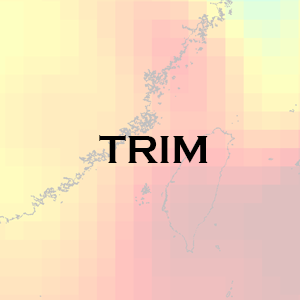
<style>
.page{position:relative;width:300px;height:300px}
.page>*{position:absolute;margin:0}
.t1{font:40px "CopperplateGothic-Bold";color:#000000}
</style>
<div class="page">
<p class="t1" style="left:99px;top:135px;width:109px;height:28px">TRIM</p>
</div>
